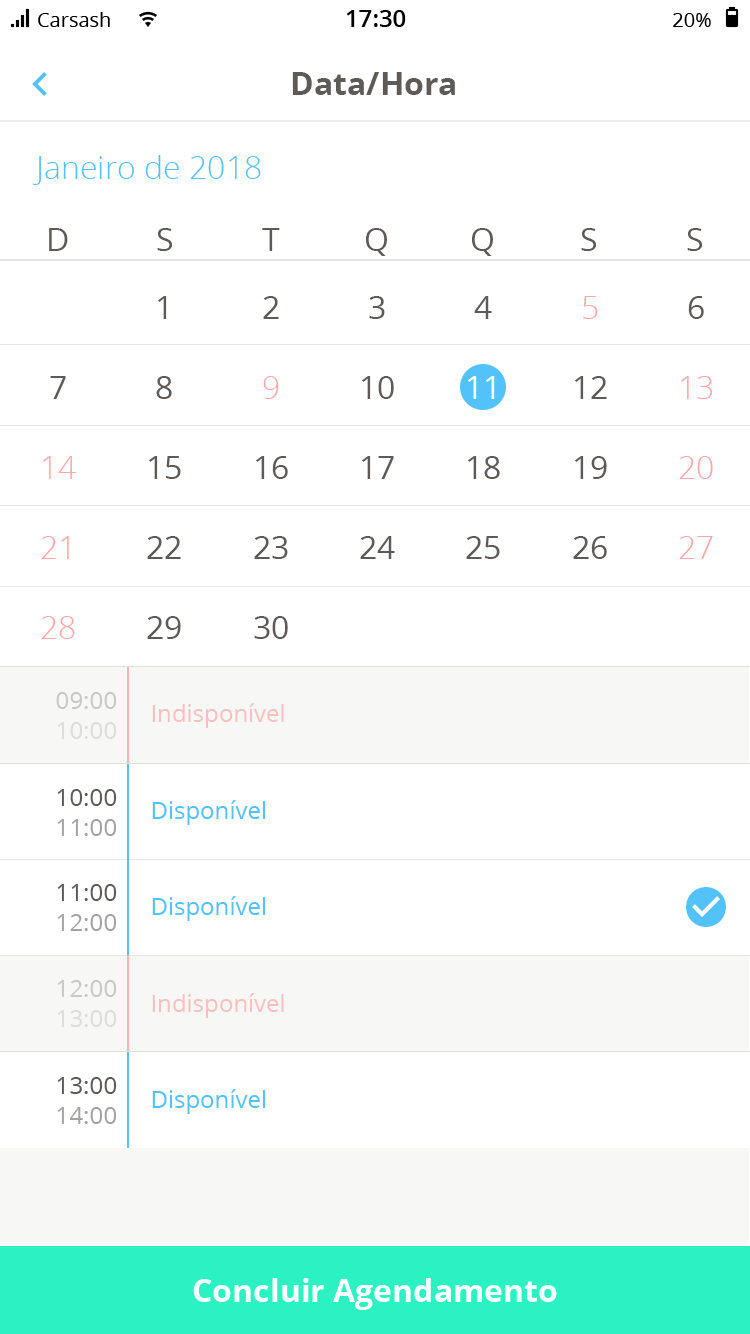
<style>
.page{position:relative;width:750px;height:1334px;background:#ffffff}
.page>*{position:absolute;margin:0}
.t1{font:32px "OpenSans-Bold";color:#5d5a58}
.t2{font:32px "OpenSans-Light";color:#53c2fa}
.t3{font:32px "OpenSans";color:#5d5a58}
.t4{font:32px "OpenSans-Light";color:#ffa7a7}
.t5{font:32px "OpenSans";color:#ffffff}
.t6{font:24px "OpenSans";color:#c9c8c7}
.t7{font:24px "OpenSans";color:#fac0c0}
.t8{font:24px "OpenSans";color:#dddddc}
.t9{font:24px "OpenSans";color:#5d5a58}
.t10{font:24px "OpenSans";color:#53c2fa}
.t11{font:24px "OpenSans";color:#a5a3a2}
</style>
<div class="page">
<p class="t1" style="left:292px;top:72px;width:163px;height:23px">Data/Hora</p>
<p class="t2" style="left:33px;top:155px;width:228px;height:30px">Janeiro de 2018</p>
<p class="t3" style="left:49px;top:228px;width:19px;height:23px">D</p>
<p class="t3" style="left:157px;top:228px;width:15px;height:23px">S</p>
<p class="t3" style="left:262px;top:228px;width:18px;height:23px">T</p>
<p class="t3" style="left:366px;top:228px;width:21px;height:28px">Q</p>
<p class="t3" style="left:472px;top:228px;width:21px;height:28px">Q</p>
<p class="t3" style="left:581px;top:228px;width:15px;height:23px">S</p>
<p class="t3" style="left:687px;top:228px;width:15px;height:23px">S</p>
<p class="t3" style="left:158px;top:296px;width:9px;height:23px">1</p>
<p class="t3" style="left:263px;top:296px;width:16px;height:23px">2</p>
<p class="t3" style="left:369px;top:296px;width:16px;height:23px">3</p>
<p class="t3" style="left:474px;top:296px;width:18px;height:23px">4</p>
<p class="t4" style="left:583px;top:296px;width:15px;height:23px">5</p>
<p class="t3" style="left:688px;top:296px;width:16px;height:23px">6</p>
<p class="t3" style="left:50px;top:376px;width:16px;height:23px">7</p>
<p class="t3" style="left:156px;top:376px;width:16px;height:23px">8</p>
<p class="t4" style="left:263px;top:376px;width:16px;height:23px">9</p>
<p class="t3" style="left:362px;top:376px;width:32px;height:23px">10</p>
<p class="t5" style="left:468px;top:376px;width:27px;height:23px">11</p>
<p class="t3" style="left:575px;top:376px;width:32px;height:23px">12</p>
<p class="t4" style="left:681px;top:376px;width:32px;height:23px">13</p>
<p class="t4" style="left:43px;top:456px;width:33px;height:23px">14</p>
<p class="t3" style="left:149px;top:456px;width:32px;height:23px">15</p>
<p class="t3" style="left:256px;top:456px;width:32px;height:23px">16</p>
<p class="t3" style="left:362px;top:456px;width:32px;height:23px">17</p>
<p class="t3" style="left:468px;top:456px;width:32px;height:23px">18</p>
<p class="t3" style="left:575px;top:456px;width:32px;height:23px">19</p>
<p class="t4" style="left:679px;top:456px;width:34px;height:23px">20</p>
<p class="t4" style="left:41px;top:536px;width:28px;height:23px">21</p>
<p class="t3" style="left:147px;top:536px;width:34px;height:23px">22</p>
<p class="t3" style="left:254px;top:536px;width:34px;height:23px">23</p>
<p class="t3" style="left:360px;top:536px;width:35px;height:23px">24</p>
<p class="t3" style="left:466px;top:536px;width:34px;height:23px">25</p>
<p class="t3" style="left:573px;top:536px;width:34px;height:23px">26</p>
<p class="t4" style="left:679px;top:536px;width:34px;height:23px">27</p>
<p class="t4" style="left:41px;top:616px;width:34px;height:23px">28</p>
<p class="t3" style="left:147px;top:616px;width:34px;height:23px">29</p>
<p class="t3" style="left:254px;top:616px;width:34px;height:23px">30</p>
<p class="t6" style="left:56px;top:692px;width:61px;height:17px">09:00</p>
<p class="t7" style="left:152px;top:703px;width:132px;height:25px">Indisponível</p>
<p class="t8" style="left:57px;top:722px;width:60px;height:17px">10:00</p>
<p class="t9" style="left:57px;top:789px;width:60px;height:17px">10:00</p>
<p class="t10" style="left:152px;top:800px;width:114px;height:25px">Disponível</p>
<p class="t11" style="left:57px;top:819px;width:60px;height:17px">11:00</p>
<p class="t9" style="left:57px;top:884px;width:60px;height:17px">11:00</p>
<p class="t10" style="left:152px;top:896px;width:114px;height:25px">Disponível</p>
<p class="t11" style="left:57px;top:914px;width:60px;height:17px">12:00</p>
<p class="t6" style="left:57px;top:980px;width:60px;height:17px">12:00</p>
<p class="t7" style="left:152px;top:993px;width:132px;height:25px">Indisponível</p>
<p class="t8" style="left:57px;top:1010px;width:60px;height:17px">13:00</p>
<p class="t9" style="left:57px;top:1077px;width:60px;height:17px">13:00</p>
<p class="t10" style="left:152px;top:1089px;width:114px;height:25px">Disponível</p>
<p class="t11" style="left:57px;top:1107px;width:60px;height:17px">14:00</p>
</div>
